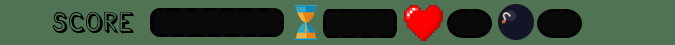
<style>
.page{position:relative;width:675px;height:45px;background:#507453}
.page>*{position:absolute;margin:0}
.t1{font:30px "Cartoonish";color:#000000}
</style>
<div class="page">
<p class="t1" style="left:52px;top:12px;width:82px;height:22px">score</p>
</div>
